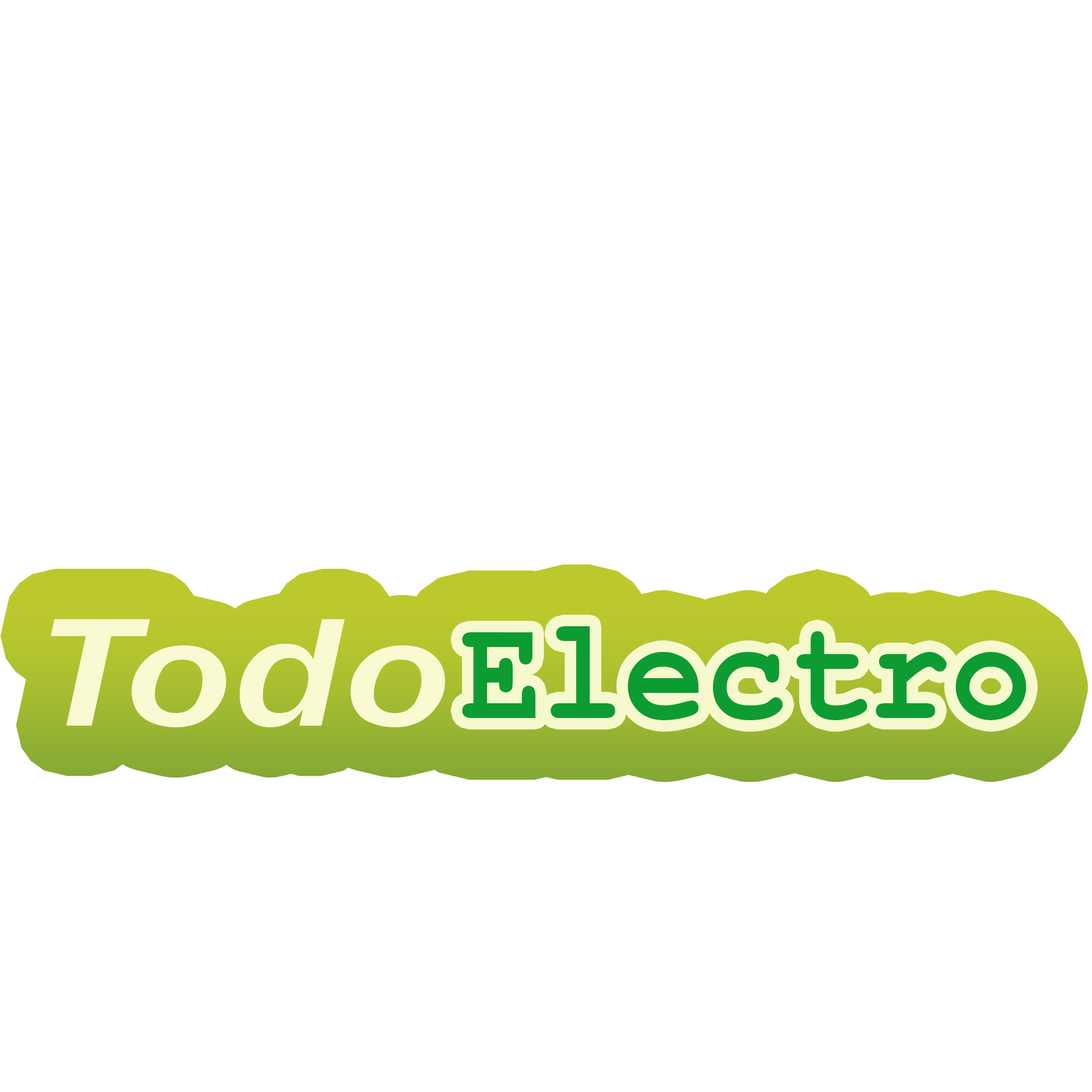
<style>
.page{position:relative;width:1092px;height:1092px;background:#ffffff}
.page>*{position:absolute;margin:0}
.t1{font:159.4px "FranklinGothic-MediumItalic";color:#f9f9d2;scale:1.3 1}
.t2{font:144.6px "CourierNewPS-BoldMT";color:#0d9c32;scale:0.94 1}
</style>
<div class="page">
<p class="t1" style="left:50px;top:619px;width:396px;height:108px">Todo</p>
<p class="t2" style="left:462px;top:626px;width:564px;height:94px">Electro</p>
</div>
